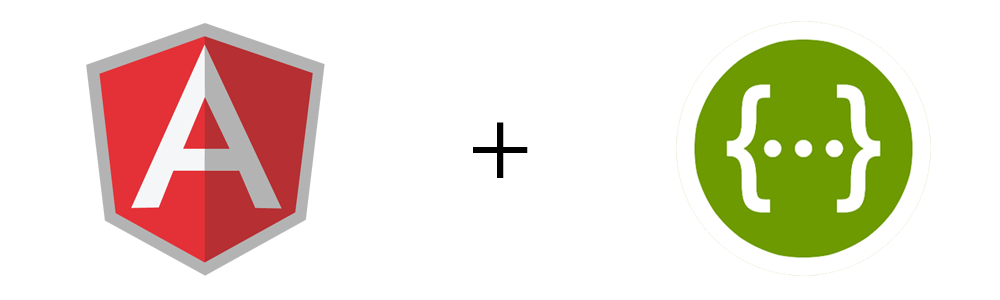
<style>
.page{position:relative;width:1000px;height:300px;background:#ffffff}
.page>*{position:absolute;margin:0}
.t1{font:175px "BlackJackRegular";letter-spacing:-0.01em;color:#000000}
</style>
<div class="page">
<p class="t1" style="left:473px;top:122px;width:55px;height:56px">+</p>
</div>
